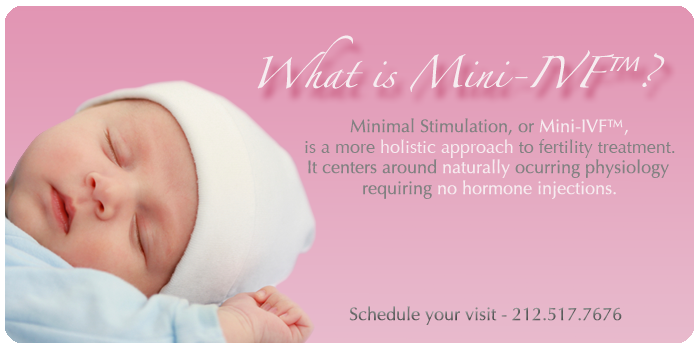
<style>
.page{position:relative;width:700px;height:350px}
.page>*{position:absolute;margin:0}
.t1{font:28px "Zapfino";color:#f6ecf0}
.t2{font:18px "Optima-Regular";color:#818181}
.t3{font:18px "Optima-Regular";color:#f6ecf0}
.t4{font:18px "Optima-Regular";color:#6d6d6d}
</style>
<div class="page">
<p class="t1" style="left:257px;top:35px;width:408px;height:57px">What is Mini-IVF™?</p>
<p class="t2" style="left:350px;top:118px;width:278px;height:18px">Minimal Stimulation, or<span class="t3"> Mini-IVF™,</span></p>
<p class="t2" style="left:305px;top:139px;width:370px;height:19px">is a more <span class="t3">holistic approach </span>to fertility treatment.</p>
<p class="t2" style="left:308px;top:159px;width:361px;height:19px">It centers around <span class="t3">naturally </span>ocurring physiology</p>
<p class="t3" style="left:363px;top:180px;width:253px;height:19px"><span class="t2">requiring </span>no hormone injections.</p>
<p class="t4" style="left:349px;top:306px;width:273px;height:19px">Schedule your visit - 212.517.7676</p>
</div>
